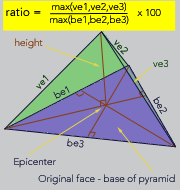
<style>
.page{position:relative;width:180px;height:190px;background:#c9cacb}
.page>*{position:absolute;margin:0}
.t1{font:10px "Avatar-Light";color:#060200}
.t2{font:12px "Avatar-Light";color:#040400}
.t3{font:10px "Avatar-Light";color:#040400}
.t4{font:10px "Avatar-Light";color:#853d12}
.t5{font:10px "Avatar-Light";color:#1c4b18}
.t6{font:10px "Avatar-Light";color:#242545}
</style>
<div class="page">
<p class="t1" style="left:52px;top:2px;width:74px;height:10px">max(ve1,ve2,ve3)</p>
<p class="t2" style="left:6px;top:7px;width:35px;height:9px">ratio =</p>
<p class="t3" style="left:50px;top:15px;width:79px;height:10px">max(be1,be2,be3)</p>
<p class="t3" style="left:137px;top:9px;width:24px;height:7px">x 100</p>
<p class="t4" style="left:15px;top:38px;width:28px;height:11px">height</p>
<p class="t5" style="left:114px;top:39px;width:14px;height:16px;rotate:47deg">ve2</p>
<p class="t5" style="left:153px;top:60px;width:15px;height:7px">ve3</p>
<p class="t5" style="left:36px;top:75px;width:13px;height:14px;rotate:-45deg">ve1</p>
<p class="t6" style="left:53px;top:86px;width:17px;height:13px;rotate:-26deg">be1</p>
<p class="t6" style="left:153px;top:96px;width:14px;height:18px;rotate:59deg">be2</p>
<p class="t6" style="left:67px;top:138px;width:17px;height:10px;rotate:7deg">be3</p>
<p class="t6" style="left:14px;top:158px;width:42px;height:10px">Epicenter</p>
<p class="t6" style="left:38px;top:174px;width:137px;height:11px">Original face - base of pyramid</p>
</div>
